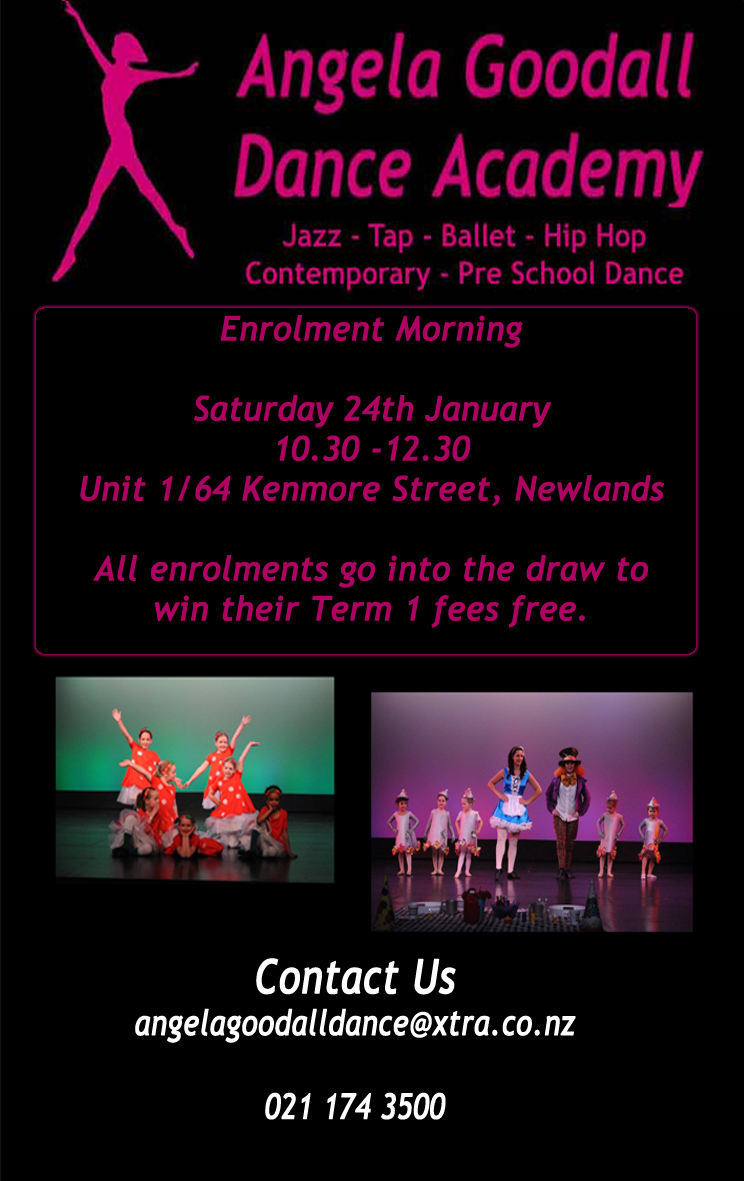
<style>
.page{position:relative;width:744px;height:1181px;background:#000000}
.page>*{position:absolute;margin:0}
.t1{font:33.3px "TrebuchetMS-Italic";color:#af0163;font-weight:bold}
.t2{font:34.9px "TrebuchetMS-Italic";color:#ffffff;font-weight:bold;scale:0.84 1}
.t3{font:46.9px "TrebuchetMS-Italic";color:#ffffff;font-weight:bold;scale:0.84 1}
</style>
<div class="page">
<p class="t1" style="left:80px;top:315px;width:584px;height:313px;text-align:center">Enrolment Morning <br><br>Saturday 24th January <br>10.30 -12.30<br>Unit 1/64 Kenmore Street, Newlands<br><br>All enrolments go into the draw to win their Term 1 fees free.</p>
<p class="t2" style="left:135px;top:958px;width:441px;height:162px;text-align:center"><span class="t3">Contact Us<br></span>angelagoodalldance@xtra.co.nz<br><br>021 174 3500<br><br>http://www.facebook.com/pages/Angela-Goodall-Dance-Academy/351075408433146?r<br><br>www.angelagoodalldanceacademy.co.nz</p>
</div>
